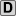
<style>
.page{position:relative;width:16px;height:16px;background:#d5d5d5}
.page>*{position:absolute;margin:0}
.t1{font:14.8px "Arial-BoldMT";color:#000000;scale:0.95 1}
</style>
<div class="page">
<p class="t1" style="left:3px;top:2px;width:10px;height:11px">D</p>
</div>
